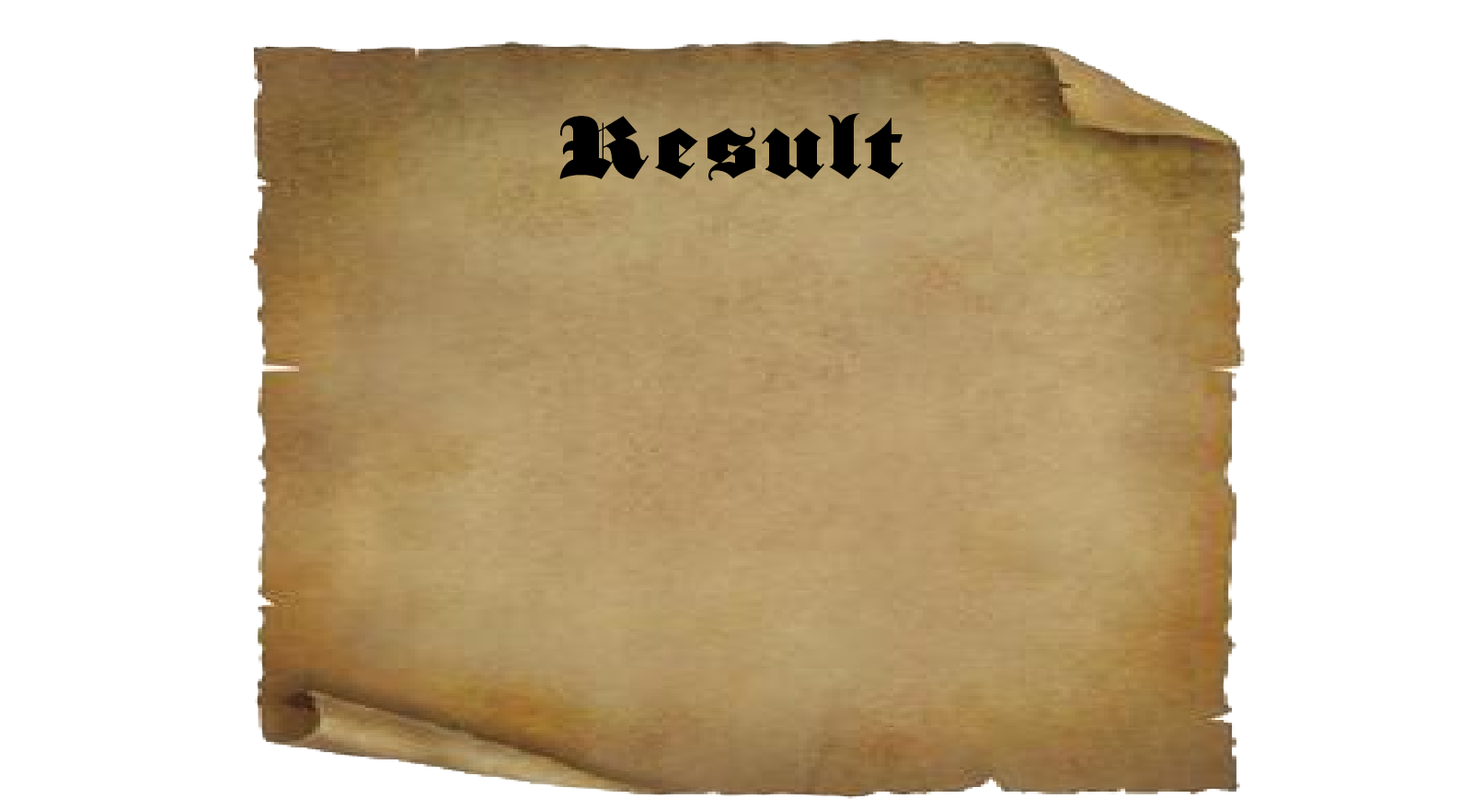
<style>
.page{position:relative;width:1472px;height:810px;background:#ffffff}
.page>*{position:absolute;margin:0}
.t1{font:88.3px "Avebury-Black";letter-spacing:0.05em;color:#000000}
</style>
<div class="page">
<p class="t1" style="left:559px;top:113px;width:344px;height:68px">Result</p>
</div>
